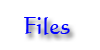
<style>
.page{position:relative;width:100px;height:50px;background:#ffffff}
.page>*{position:absolute;margin:0}
.t1{font:24px "Calligraphic421BT-RomanB";color:#0000ff}
</style>
<div class="page">
<p class="t1" style="left:24px;top:17px;width:46px;height:18px">Files</p>
</div>
